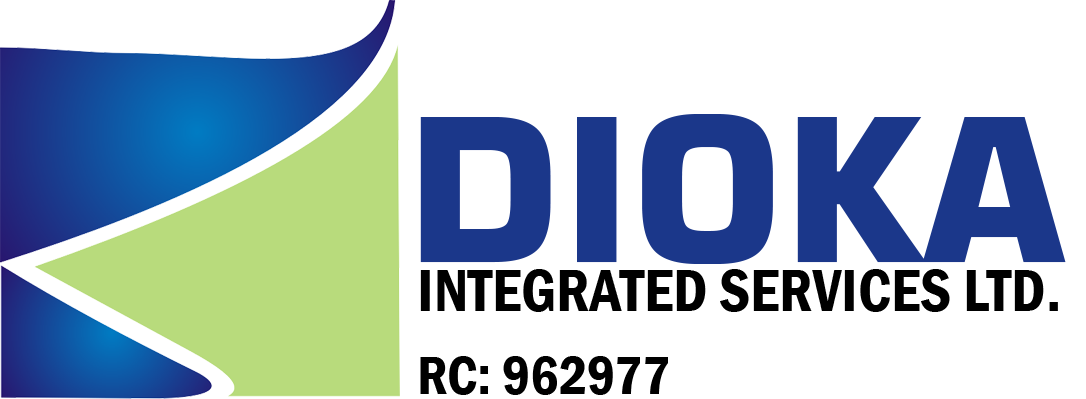
<style>
.page{position:relative;width:1086px;height:399px;background:#ffffff}
.page>*{position:absolute;margin:0}
.t1{font:200px "Square721BT-Bold";color:#1b378a}
.t2{font:61.1px "FranklinGothic-DemiCond";color:#000000}
.t3{font:55.6px "FranklinGothic-DemiCond";color:#000000}
</style>
<div class="page">
<p class="t1" style="left:420px;top:114px;width:646px;height:150px">DIOKA</p>
<p class="t2" style="left:420px;top:269px;width:638px;height:43px">INTEGRATED SERVICES LTD.</p>
<p class="t3" style="left:420px;top:356px;width:248px;height:39px">RC: 962977</p>
</div>
